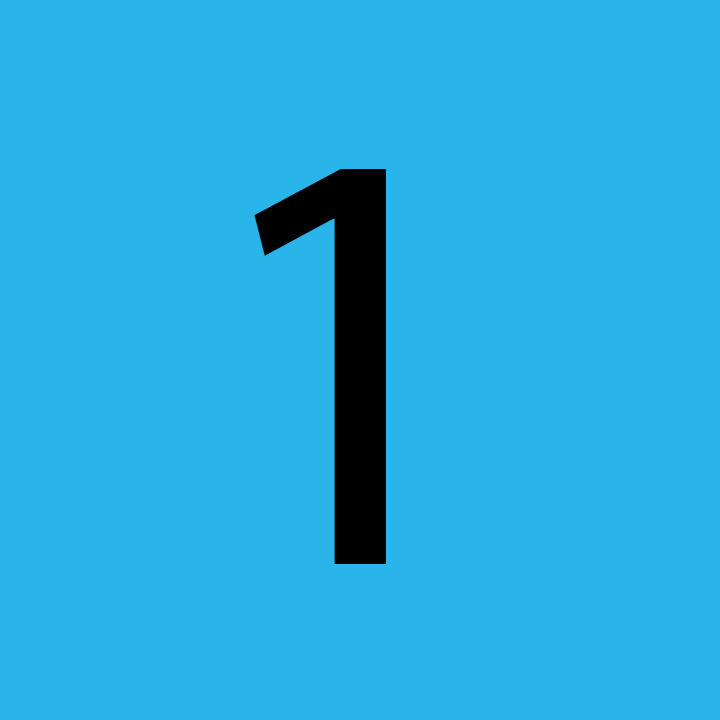
<style>
.page{position:relative;width:720px;height:720px;background:#29b5e9}
.page>*{position:absolute;margin:0}
.t1{font:607px "MyriadPro-Regular";letter-spacing:0.075em;color:#000000}
</style>
<div class="page">
<p class="t1" style="left:254px;top:169px;width:132px;height:395px">1</p>
</div>
